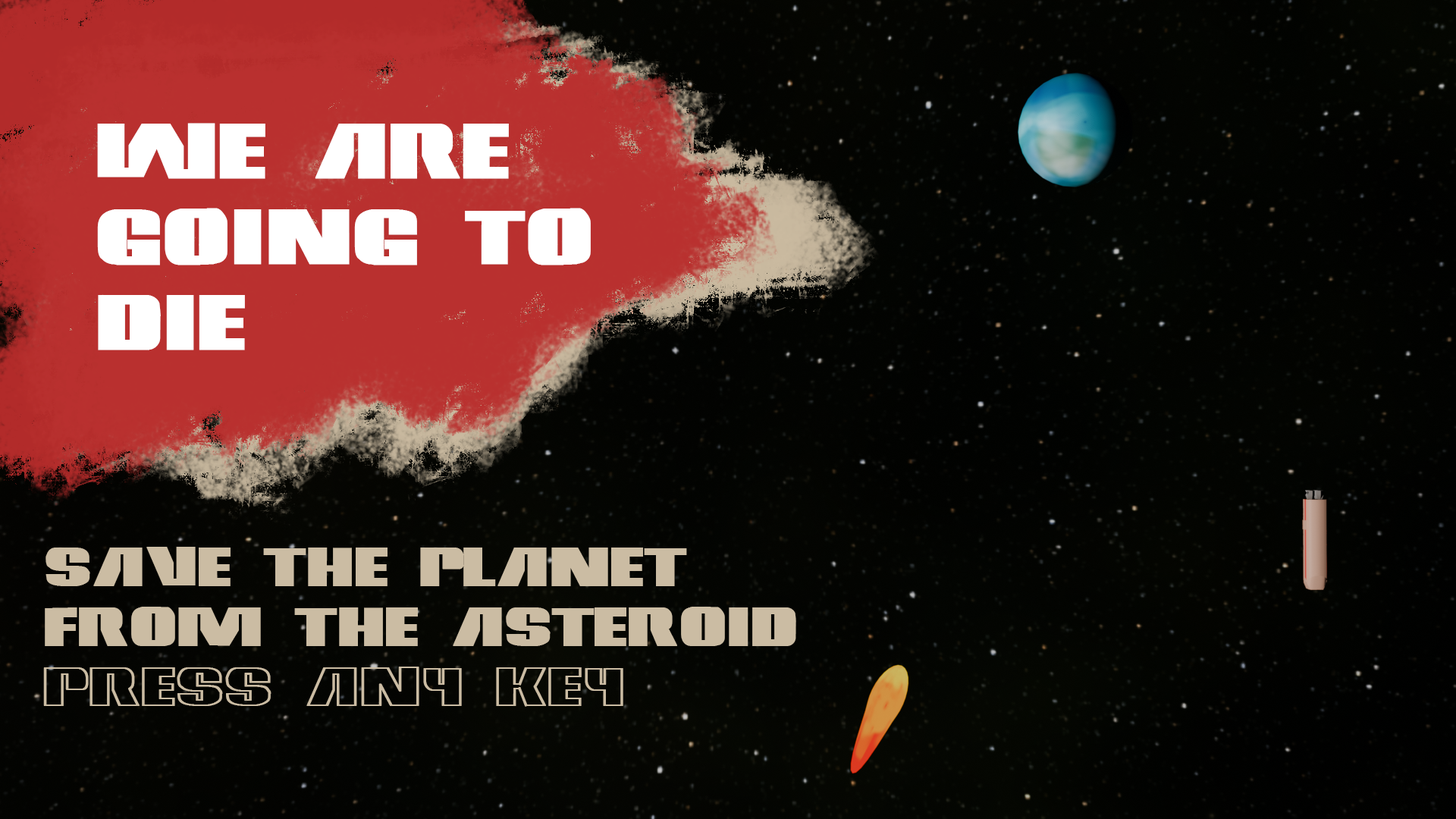
<style>
.page{position:relative;width:1456px;height:819px}
.page>*{position:absolute;margin:0}
.t1{font:71.6px "RCA";letter-spacing:-0.012em;color:#ffffff;font-weight:bold}
.t2{font:50px "RCA";letter-spacing:-0.012em;color:#cbbca3;font-weight:bold}
</style>
<div class="page">
<p class="t1" style="left:97px;top:123px;width:494px;height:227px">WE ARE<br>GOING TO<br>DIE</p>
<p class="t2" style="left:43px;top:547px;width:753px;height:160px">SAVE THE PLANET<br>FROM THE ASTEROID<br>press any key</p>
</div>
